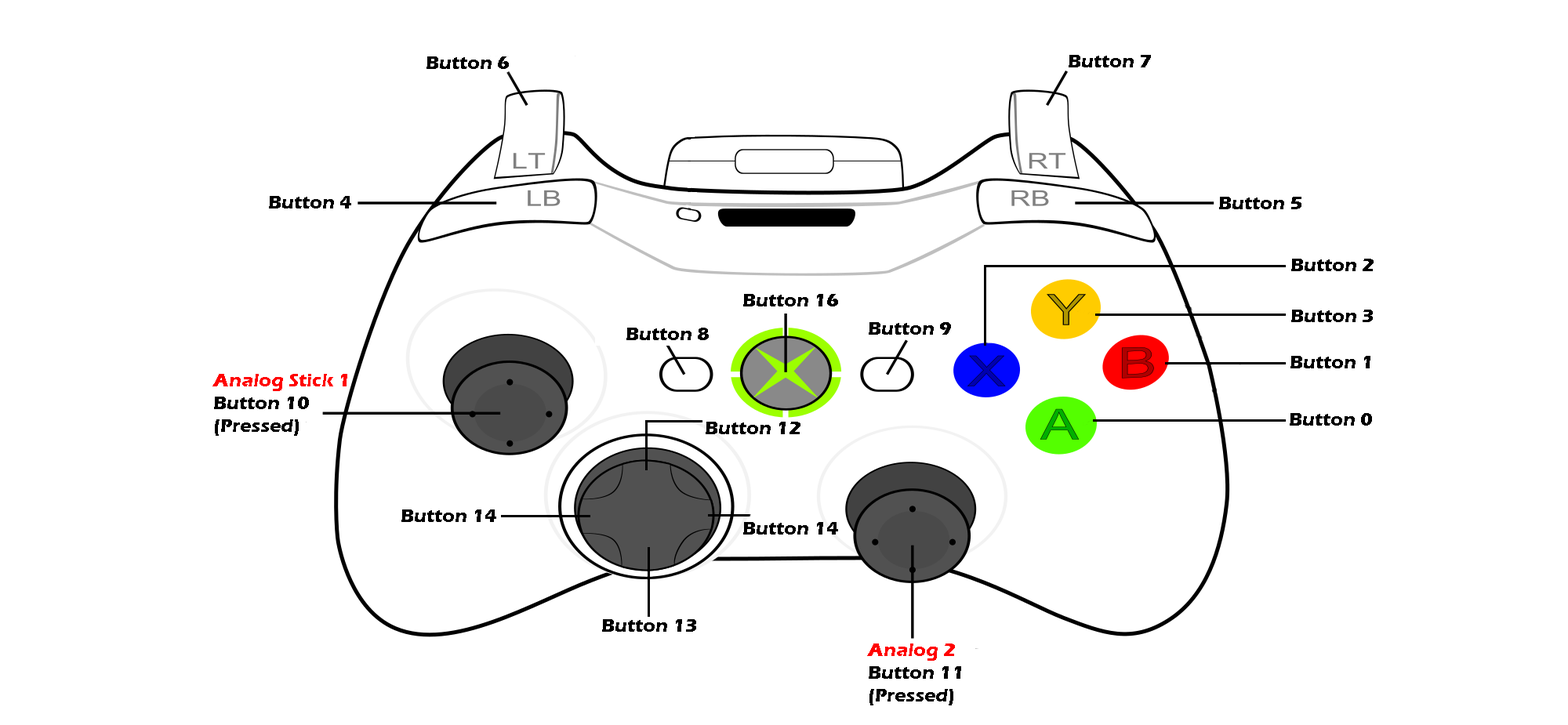
<style>
.page{position:relative;width:1568px;height:725px;background:#ffffff}
.page>*{position:absolute;margin:0}
.t1{font:18.8px "ErasITC-Bold";color:#000000}
.t2{font:18.8px "ErasITC-Bold";color:#ff0000}
</style>
<div class="page">
<p class="t1" style="left:426px;top:56px;width:83px;height:13px">Button 6</p>
<p class="t1" style="left:1069px;top:55px;width:82px;height:12px">Button 7</p>
<p class="t1" style="left:269px;top:196px;width:82px;height:13px">Button 4</p>
<p class="t1" style="left:1219px;top:197px;width:82px;height:12px">Button 5</p>
<p class="t1" style="left:1291px;top:259px;width:83px;height:12px">Button 2</p>
<p class="t1" style="left:743px;top:294px;width:95px;height:13px">Button 16</p>
<p class="t1" style="left:1291px;top:310px;width:82px;height:12px">Button 3</p>
<p class="t1" style="left:626px;top:328px;width:83px;height:12px">Button 8</p>
<p class="t1" style="left:869px;top:322px;width:82px;height:13px">Button 9</p>
<p class="t1" style="left:1290px;top:356px;width:80px;height:12px">Button 1</p>
<p class="t1" style="left:212px;top:374px;width:135px;height:62px"><span class="t2">Analog Stick 1<br></span>Button 10<br>(Pressed)</p>
<p class="t1" style="left:1290px;top:413px;width:82px;height:13px">Button 0</p>
<p class="t1" style="left:706px;top:422px;width:94px;height:12px">Button 12</p>
<p class="t1" style="left:401px;top:510px;width:95px;height:12px">Button 14</p>
<p class="t1" style="left:743px;top:522px;width:95px;height:13px">Button 14</p>
<p class="t1" style="left:602px;top:619px;width:94px;height:13px">Button 13</p>
<p class="t1" style="left:867px;top:644px;width:94px;height:62px"><span class="t2">Analog 2<br></span>Button 11<br>(Pressed)</p>
</div>
